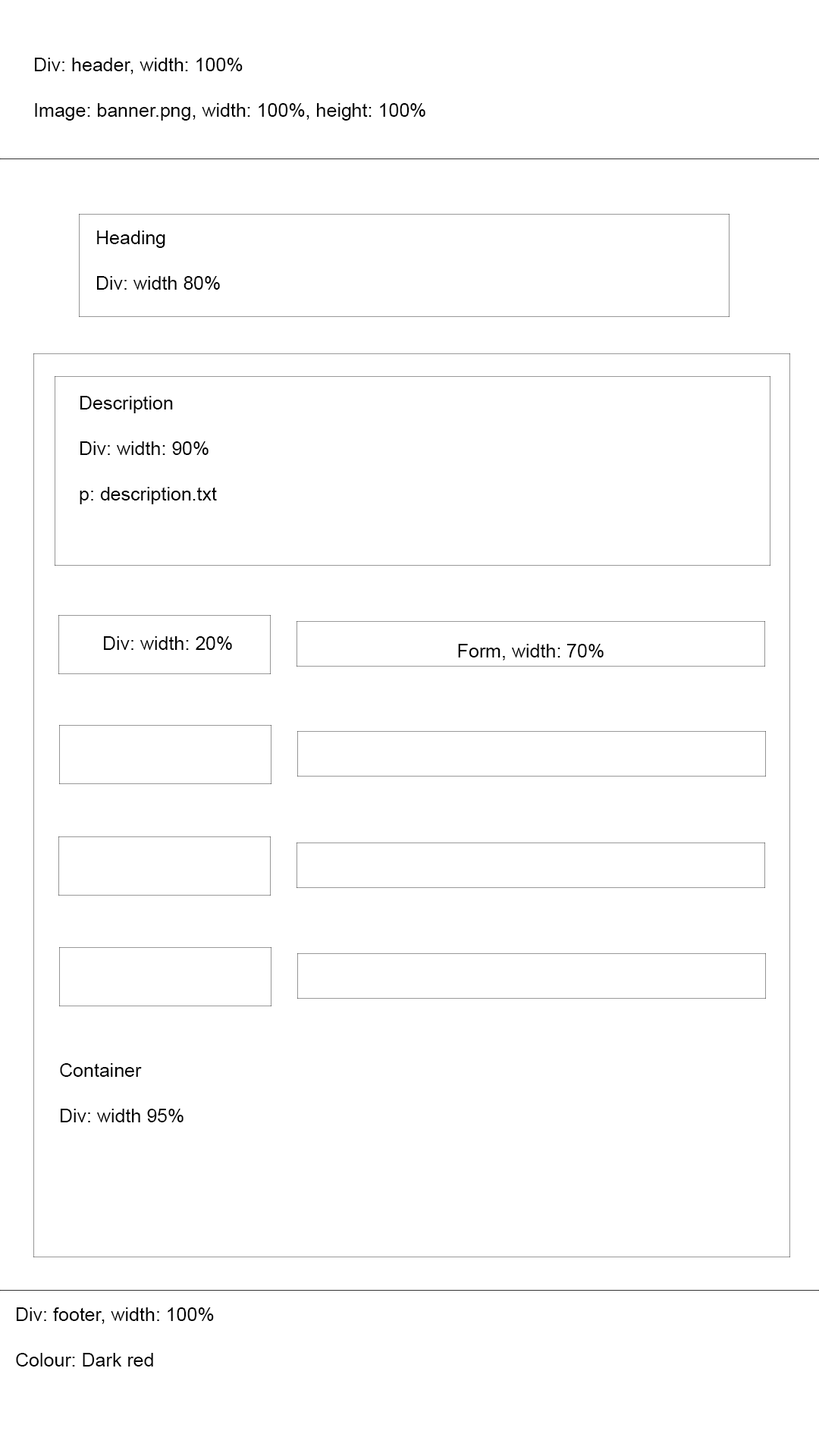
<style>
.page{position:relative;width:819px;height:1456px;background:#ffffff}
.page>*{position:absolute;margin:0}
.t1{font:19px "ArialMT";color:#000000}
</style>
<div class="page">
<p class="t1" style="left:35px;top:58px;width:390px;height:63px">Div: header, width: 100%<br><br>Image: banner.png, width: 100%, height: 100%</p>
<p class="t1" style="left:97px;top:231px;width:123px;height:59px">Heading<br><br>Div: width 80%</p>
<p class="t1" style="left:80px;top:396px;width:137px;height:108px">Description<br><br>Div: width: 90%<br><br>p: description.txt</p>
<p class="t1" style="left:104px;top:636px;width:128px;height:14px">Div: width: 20%</p>
<p class="t1" style="left:458px;top:644px;width:146px;height:16px">Form, width: 70%</p>
<p class="t1" style="left:60px;top:1063px;width:124px;height:59px">Container<br><br>Div: width 95%</p>
<p class="t1" style="left:16px;top:1307px;width:198px;height:59px">Div: footer, width: 100%<br><br>Colour: Dark red</p>
</div>
